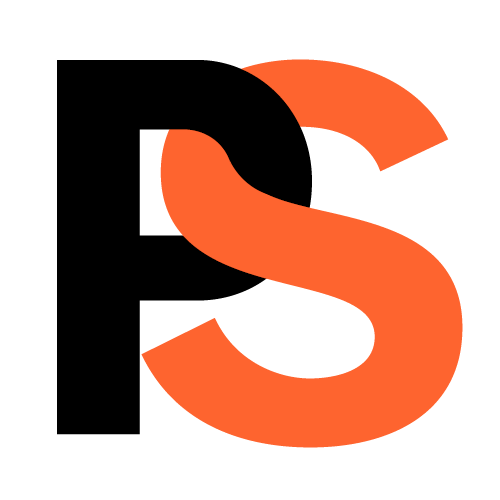
<style>
.page{position:relative;width:500px;height:500px;background:#ffffff}
.page>*{position:absolute;margin:0}
.t1{font:550px "Industri-Bold";letter-spacing:0.04em;color:#000000}
.t2{font:550px "Industri-Bold";letter-spacing:0.04em;color:#fe642f}
</style>
<div class="page">
<p class="t1" style="left:57px;top:60px;width:255px;height:375px">P</p>
<p class="t2" style="left:141px;top:59px;width:322px;height:389px">S</p>
<p class="t2" style="left:141px;top:59px;width:322px;height:389px">S</p>
</div>
